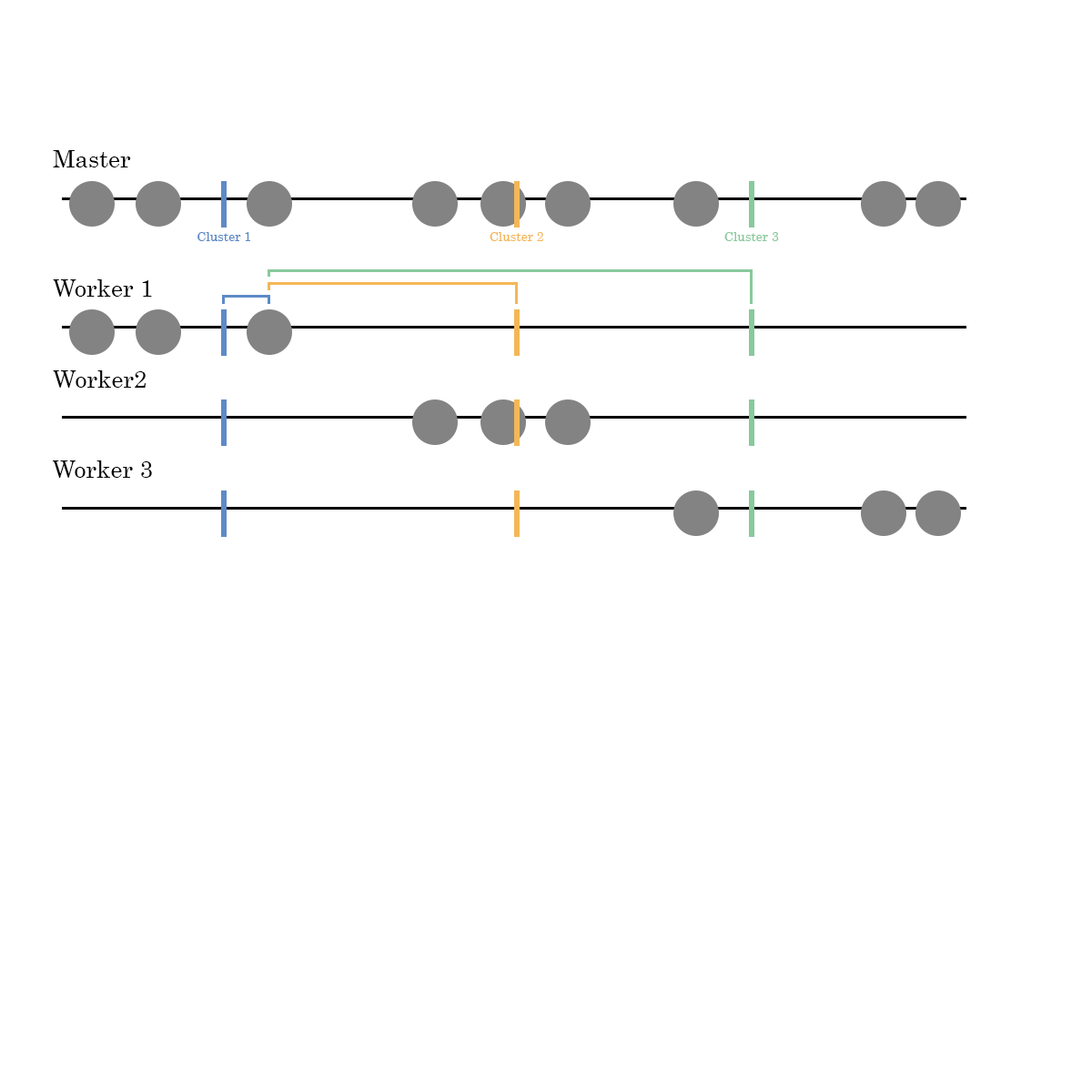
<style>
.page{position:relative;width:1092px;height:1092px;background:#ffffff}
.page>*{position:absolute;margin:0}
.t1{font:23.7px "Century";color:#000000}
.t2{font:12.7px "Century";color:#5e8ac6}
.t3{font:12.7px "Century";color:#f4b757}
.t4{font:12.7px "Century";color:#88c99d}
</style>
<div class="page">
<p class="t1" style="left:53px;top:150px;width:78px;height:17px">Master</p>
<p class="t2" style="left:197px;top:232px;width:53px;height:9px">Cluster 1</p>
<p class="t3" style="left:490px;top:232px;width:53px;height:9px">Cluster 2</p>
<p class="t4" style="left:724px;top:232px;width:55px;height:9px">Cluster 3</p>
<p class="t1" style="left:53px;top:279px;width:99px;height:18px">Worker 1</p>
<p class="t1" style="left:53px;top:370px;width:93px;height:18px">Worker2</p>
<p class="t1" style="left:52px;top:460px;width:100px;height:18px">Worker 3</p>
</div>
